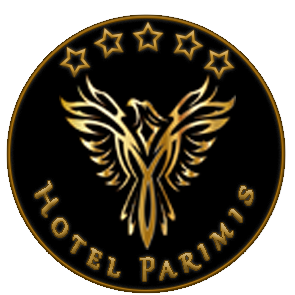
<style>
.page{position:relative;width:295px;height:295px;background:#000000}
.page>*{position:absolute;margin:0}
.t1{font:39.8px/199.3px "Gabriola";letter-spacing:0.2em;font-variant:small-caps;scale:0.54 1}
</style>
<div class="page">
<p class="t1" style="left:35px;top:181px;width:218px;height:100px;text-align:center">Hotel Parimis</p>
</div>
